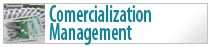
<style>
.page{position:relative;width:211px;height:47px;background:#ffffff}
.page>*{position:absolute;margin:0}
.t1{font:24px/18px "MyriadPro-SemiboldCond";color:#11839a;scale:0.78 1}
</style>
<div class="page">
<p class="t1" style="left:49px;top:5px;width:102px;height:40px">Comercialization <br>Management</p>
</div>
